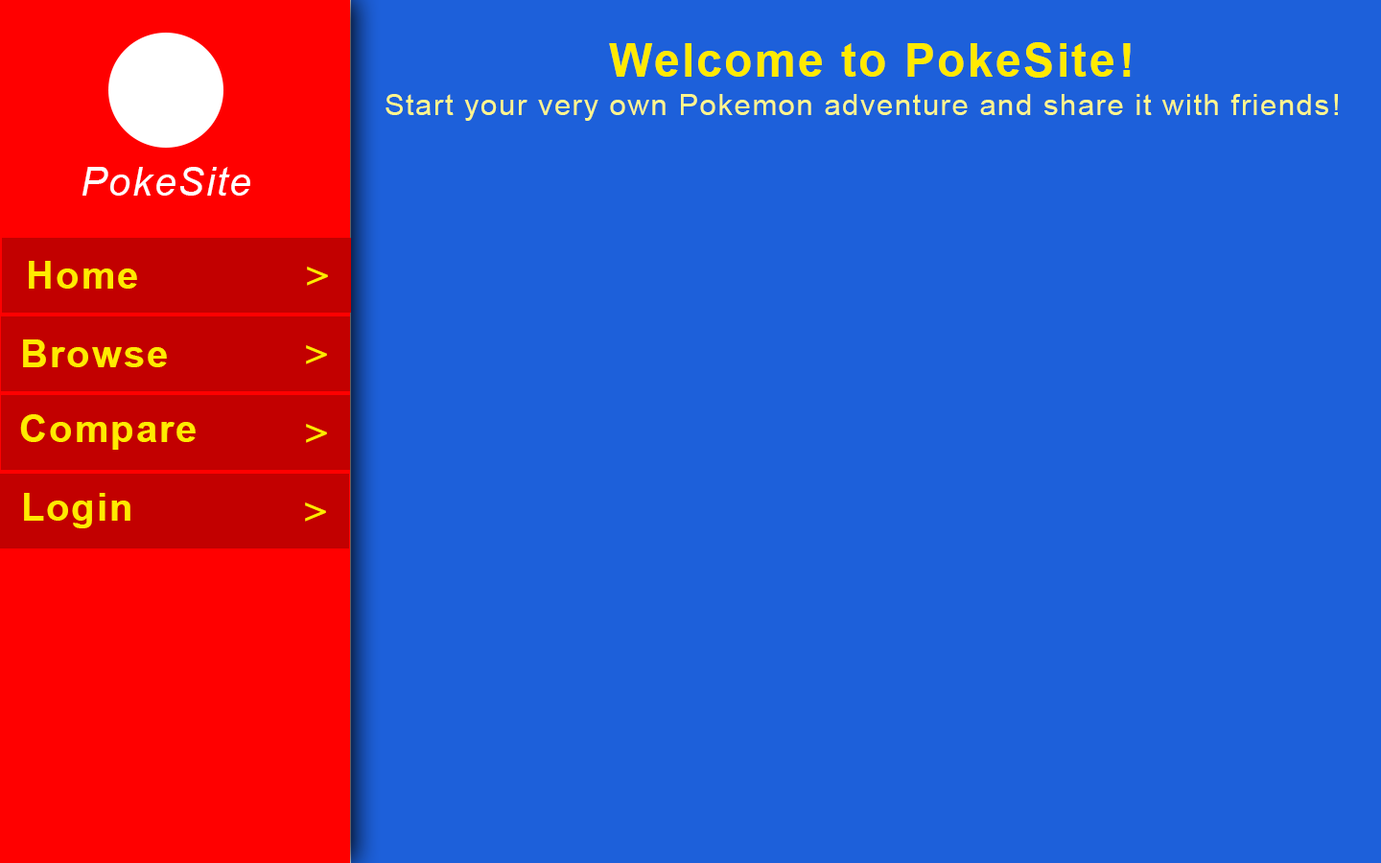
<style>
.page{position:relative;width:1381px;height:863px;background:#1d60da}
.page>*{position:absolute;margin:0}
.t1{font:46px "Arial-BoldMT";letter-spacing:0.05em;color:#ffea00}
.t2{font:29.7px "ArialMT";letter-spacing:0.05em;color:#fff68d}
.t3{font:39.3px "Arial-ItalicMT";letter-spacing:0.05em;color:#ffffff}
.t4{font:38.4px "Arial-BoldMT";letter-spacing:0.05em;color:#ffea00}
.t5{font:38.4px "TimesNewRomanPS-BoldMT";letter-spacing:0.05em;color:#ffea00}
</style>
<div class="page">
<p class="t1" style="left:609px;top:42px;width:522px;height:36px">!Welcome to PokeSite</p>
<p class="t2" style="left:386px;top:94px;width:952px;height:27px">!Start your very own Pokemon adventure and share it with friends</p>
<p class="t3" style="left:82px;top:167px;width:168px;height:29px">PokeSite</p>
<p class="t4" style="left:29px;top:261px;width:108px;height:28px">Home</p>
<p class="t5" style="left:307px;top:267px;width:21px;height:19px">&lt;</p>
<p class="t4" style="left:23px;top:340px;width:144px;height:27px">Browse</p>
<p class="t5" style="left:306px;top:345px;width:21px;height:20px">&lt;</p>
<p class="t4" style="left:20px;top:414px;width:176px;height:36px">Compare</p>
<p class="t5" style="left:306px;top:424px;width:21px;height:19px">&lt;</p>
<p class="t4" style="left:24px;top:493px;width:106px;height:36px">Login</p>
<p class="t5" style="left:305px;top:503px;width:21px;height:19px">&lt;</p>
</div>
